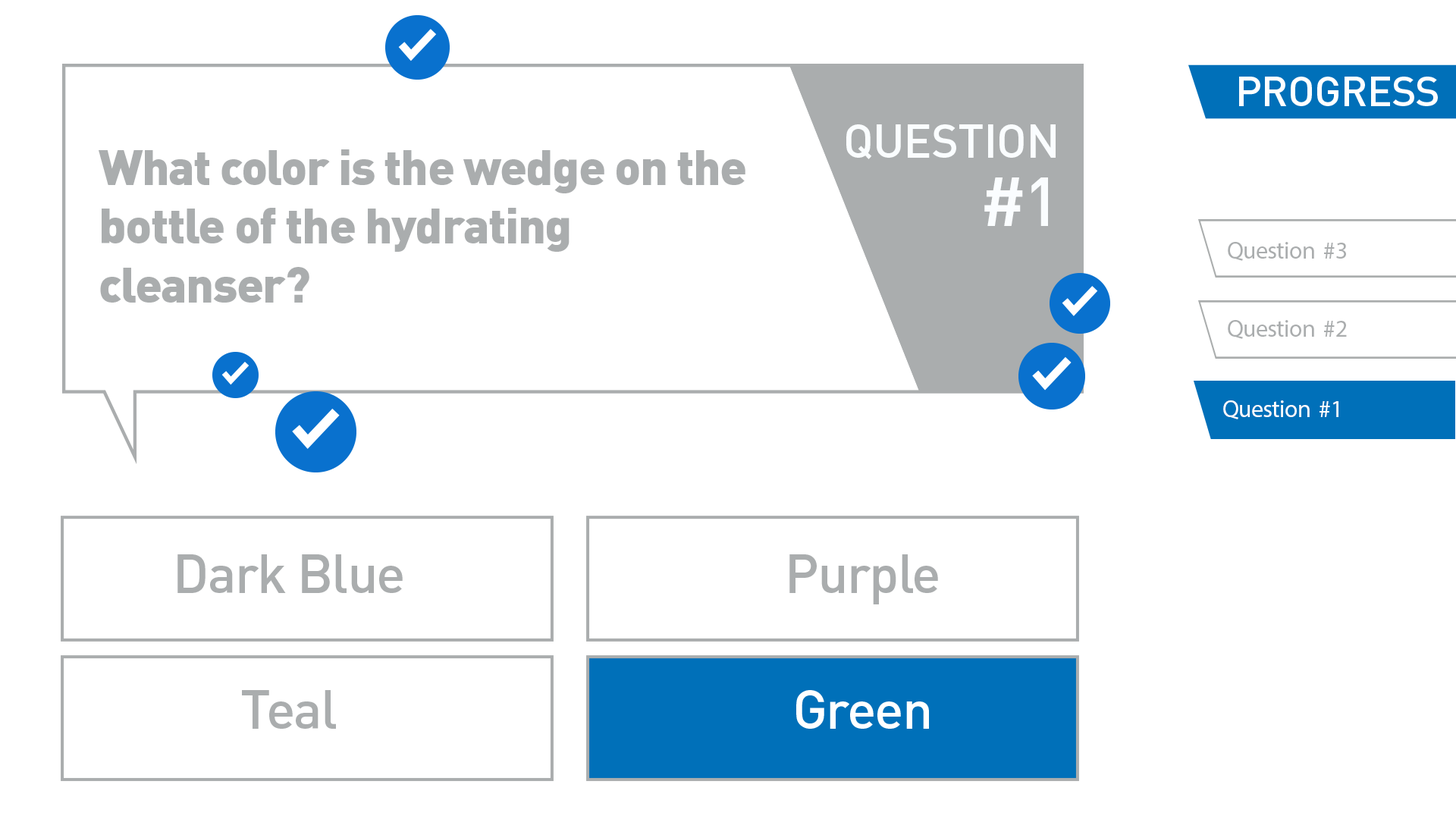
<style>
.page{position:relative;width:1456px;height:819px;background:#ffffff}
.page>*{position:absolute;margin:0}
.t1{font:41.7px "DINPro-Medium";letter-spacing:-0.025em;color:#ffffff;text-transform:uppercase}
.t2{font:46.9px "DINPro-Medium";letter-spacing:-0.025em;color:#fafdff;text-transform:uppercase}
.t3{font:68.4px/68.4px "DINPro-Medium";letter-spacing:-0.025em;color:#fafdff;text-transform:uppercase}
.t4{font:48.9px "DINPro-Black";letter-spacing:-0.025em;color:#aaadae}
.t5{font:24.3px "MyriadPro-Regular";letter-spacing:-0.025em;color:#aaadae}
.t6{font:24.3px "MyriadPro-Regular";letter-spacing:-0.025em;color:#ffffff}
.t7{font:54.1px "DINPro-Medium";letter-spacing:-0.025em;color:#aaadae}
.t8{font:54.1px "DINPro-Medium";letter-spacing:-0.025em;color:#ffffff}
</style>
<div class="page">
<p class="t1" style="left:1239px;top:77px;width:199px;height:29px">Progress</p>
<p class="t2" style="left:846px;top:124px;width:210px;height:102px;text-align:right">Question<br><span class="t3">#1</span></p>
<p class="t4" style="left:99px;top:149px;width:646px;height:154px">What color is the wedge on the bottle of the hydrating cleanser?</p>
<p class="t5" style="left:1228px;top:242px;width:118px;height:19px">Question  #3</p>
<p class="t5" style="left:1228px;top:320px;width:119px;height:19px">Question  #2</p>
<p class="t6" style="left:1223px;top:400px;width:115px;height:19px">Question  #1</p>
<p class="t7" style="left:177px;top:554px;width:226px;height:39px">Dark Blue</p>
<p class="t7" style="left:789px;top:554px;width:149px;height:50px">Purple</p>
<p class="t7" style="left:242px;top:690px;width:94px;height:39px">Teal</p>
<p class="t8" style="left:796px;top:690px;width:133px;height:39px">Green</p>
</div>
